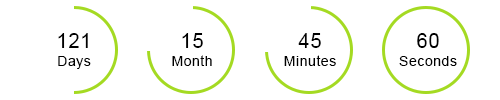
<style>
.page{position:relative;width:500px;height:100px;background:#ffffff}
.page>*{position:absolute;margin:0}
.t1{font:20px "ArialMT";letter-spacing:0.04em;color:#000000}
.t2{font:14px "ArialMT";letter-spacing:0.04em;color:#000000}
</style>
<div class="page">
<p class="t1" style="left:58px;top:33px;width:30px;height:15px">121</p>
<p class="t1" style="left:182px;top:33px;width:21px;height:15px">15</p>
<p class="t1" style="left:298px;top:33px;width:23px;height:15px">45</p>
<p class="t1" style="left:417px;top:33px;width:22px;height:15px">60</p>
<p class="t2" style="left:58px;top:56px;width:33px;height:13px">Days</p>
<p class="t2" style="left:172px;top:55px;width:40px;height:11px">Month</p>
<p class="t2" style="left:284px;top:55px;width:52px;height:11px">Minutes</p>
<p class="t2" style="left:399px;top:56px;width:58px;height:10px">Seconds</p>
</div>
